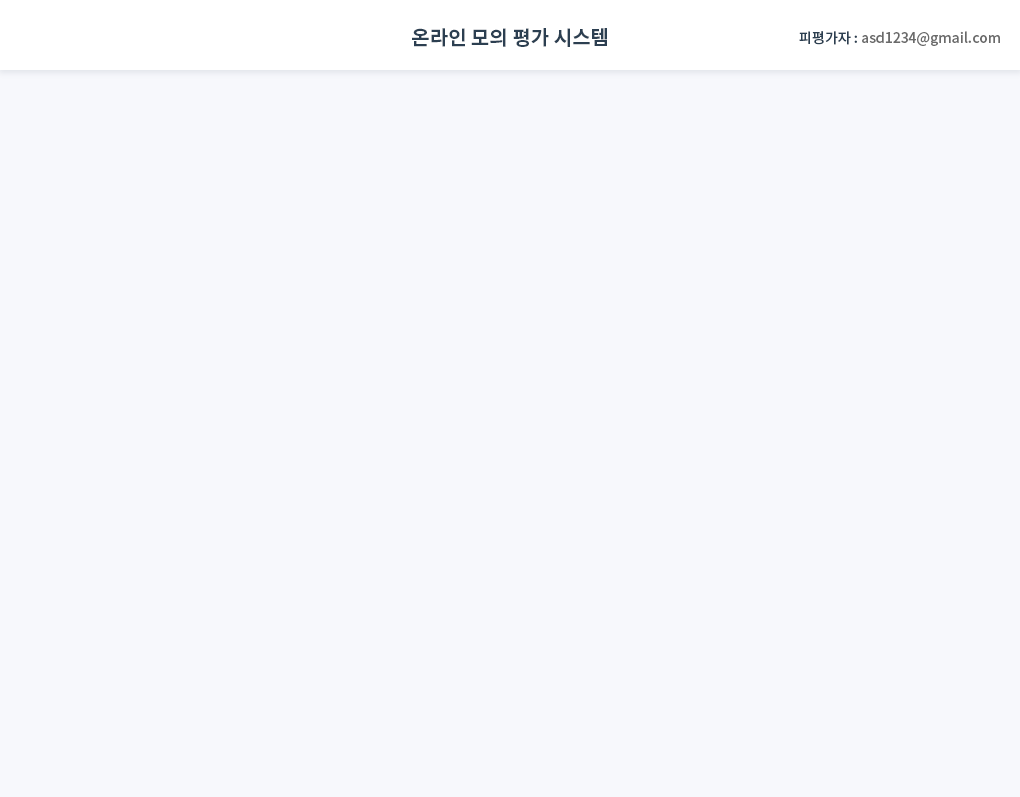
<style>
.page{position:relative;width:1020px;height:797px;background:#f7f8fc}
.page>*{position:absolute;margin:0}
.t1{font:20px "NotoSansKR-Bold";color:#2c3f51}
.t2{font:14px "NotoSansKR-Medium";color:#6a6a6a}
.t3{font:14px "NotoSansKR-Medium";color:#2c3f51}
</style>
<div class="page">
<p class="t1" style="left:412px;top:28px;width:195px;height:19px">온라인 모의 평가 시스템</p>
<p class="t2" style="left:799px;top:31px;width:201px;height:15px"><span class="t3">피평가자 : </span>asd1234@gmail.com</p>
</div>
